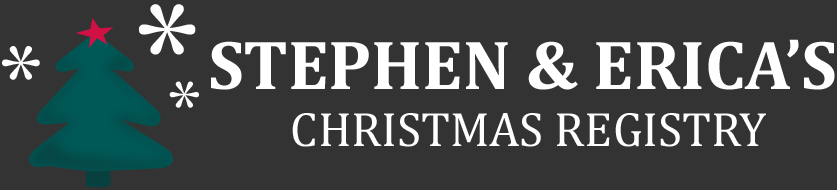
<style>
.page{position:relative;width:837px;height:190px;background:#333333}
.page>*{position:absolute;margin:0}
.t1{font:144.7px "Georgia-Italic";color:#ffffff}
.t2{font:70.3px "Cambria-Bold";color:#ffffff}
.t3{font:97.3px "Georgia-Italic";color:#ffffff}
.t4{font:75.3px "Georgia-Italic";color:#ffffff}
.t5{font:48.8px "Cambria";color:#ffffff}
</style>
<div class="page">
<p class="t1" style="left:138px;top:4px;width:58px;height:51px">*</p>
<p class="t2" style="left:211px;top:39px;width:624px;height:51px">STEPHEN &amp; ERICA’S</p>
<p class="t3" style="left:2px;top:46px;width:38px;height:34px">*</p>
<p class="t4" style="left:169px;top:81px;width:30px;height:27px">*</p>
<p class="t5" style="left:292px;top:113px;width:474px;height:34px">CHRISTMAS REGISTRY</p>
</div>
